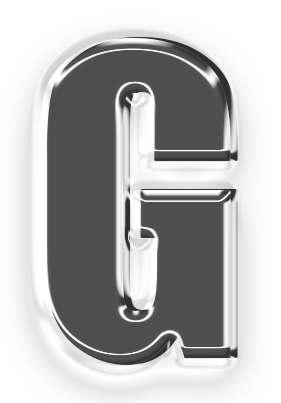
<style>
.page{position:relative;width:281px;height:403px;background:#4e4e4e}
.page>*{position:absolute;margin:0}
.t1{font:395px "Impact";color:#4e4e4e;font-weight:bold}
.t2{font:395px "Impact";color:#393939;font-weight:bold}
</style>
<div class="page">
<p class="t1" style="left:39px;top:38px;width:192px;height:328px">G</p>
<p class="t2" style="left:46px;top:37px;width:192px;height:328px">G</p>
</div>
